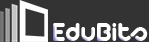
<style>
.page{position:relative;width:149px;height:42px;background:#333333}
.page>*{position:absolute;margin:0}
.t1{font:28.1px "Arista2.0Alternate";color:#ffffff}
</style>
<div class="page">
<p class="t1" style="left:53px;top:23px;width:95px;height:18px">EduBits</p>
</div>
